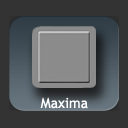
<style>
.page{position:relative;width:128px;height:128px;background:#333333}
.page>*{position:absolute;margin:0}
.t1{font:14px "TrebuchetMS";color:#ffffff}
</style>
<div class="page">
<p class="t1" style="left:40px;top:97px;width:48px;height:12px">Maxima</p>
</div>
